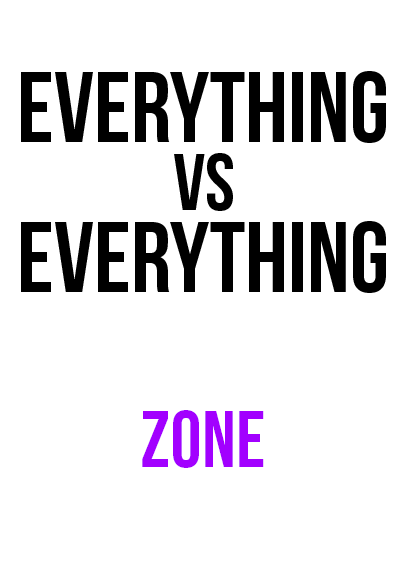
<style>
.page{position:relative;width:408px;height:585px;background:#ffffff}
.page>*{position:absolute;margin:0}
.t1{font:100px "BebasNeue";color:#000000}
.t2{font:80px "BebasNeue";color:#000000}
.t3{font:80px "BebasNeue-Regular";color:#a200ff}
</style>
<div class="page">
<p class="t1" style="left:21px;top:71px;width:365px;height:72px">everything</p>
<p class="t2" style="left:174px;top:153px;width:59px;height:58px">vs</p>
<p class="t1" style="left:21px;top:221px;width:365px;height:72px">everything</p>
<p class="t3" style="left:142px;top:410px;width:122px;height:58px">zone</p>
</div>
